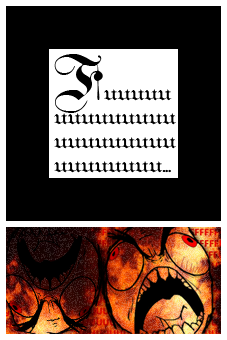
<style>
.page{position:relative;width:227px;height:340px;background:#000000}
.page>*{position:absolute;margin:0}
.t1{font:20px "TeutonicNo1-DemiBold";color:#000000}
.t2{font:60.2px "TeutonicNo1-DemiBold";color:#000000}
</style>
<div class="page">
<p class="t1" style="left:54px;top:54px;width:122px;height:119px"><span class="t2">F</span>uuuuu<br>uuuuuuuuu<br>uuuuuuuuu<br>uuuuuuuu...</p>
</div>
